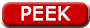
<style>
.page{position:relative;width:90px;height:28px;background:#cc0000}
.page>*{position:absolute;margin:0}
.t1{font:19px "Verdana";color:#ffffff;font-weight:bold}
</style>
<div class="page">
<p class="t1" style="left:21px;top:6px;width:50px;height:15px">PEEK</p>
</div>
